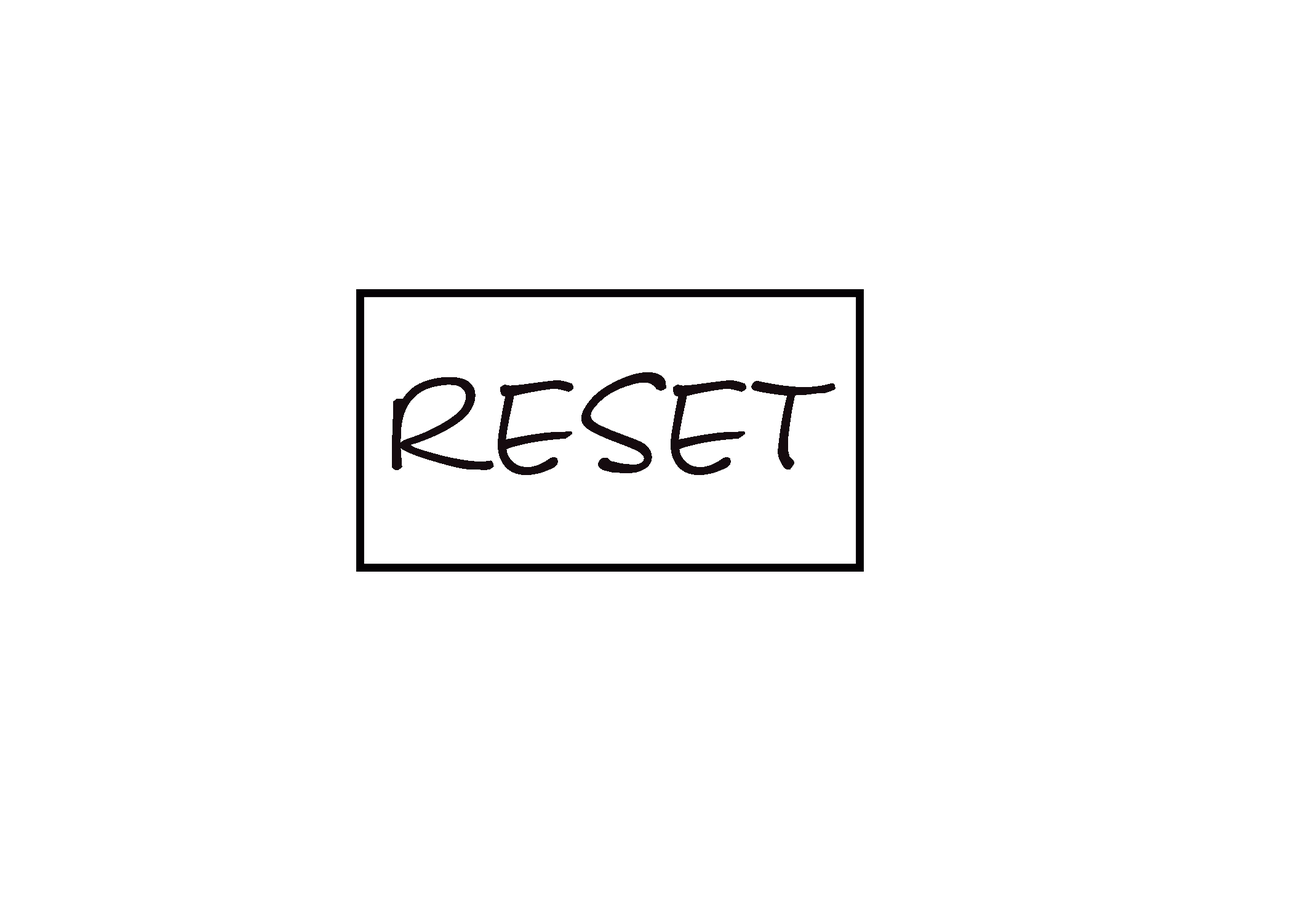
<style>
.page{position:relative;width:1292px;height:923px;background:#ffffff}
.page>*{position:absolute;margin:0}
.t1{font:123.1px "Calvin";color:#150b0f}
.t2{font:35.9px "Calvin";color:#150b0f}
</style>
<div class="page">
<p class="t1" style="left:392px;top:372px;width:444px;height:103px"><span class="t2"><br><br></span>rESET</p>
</div>
